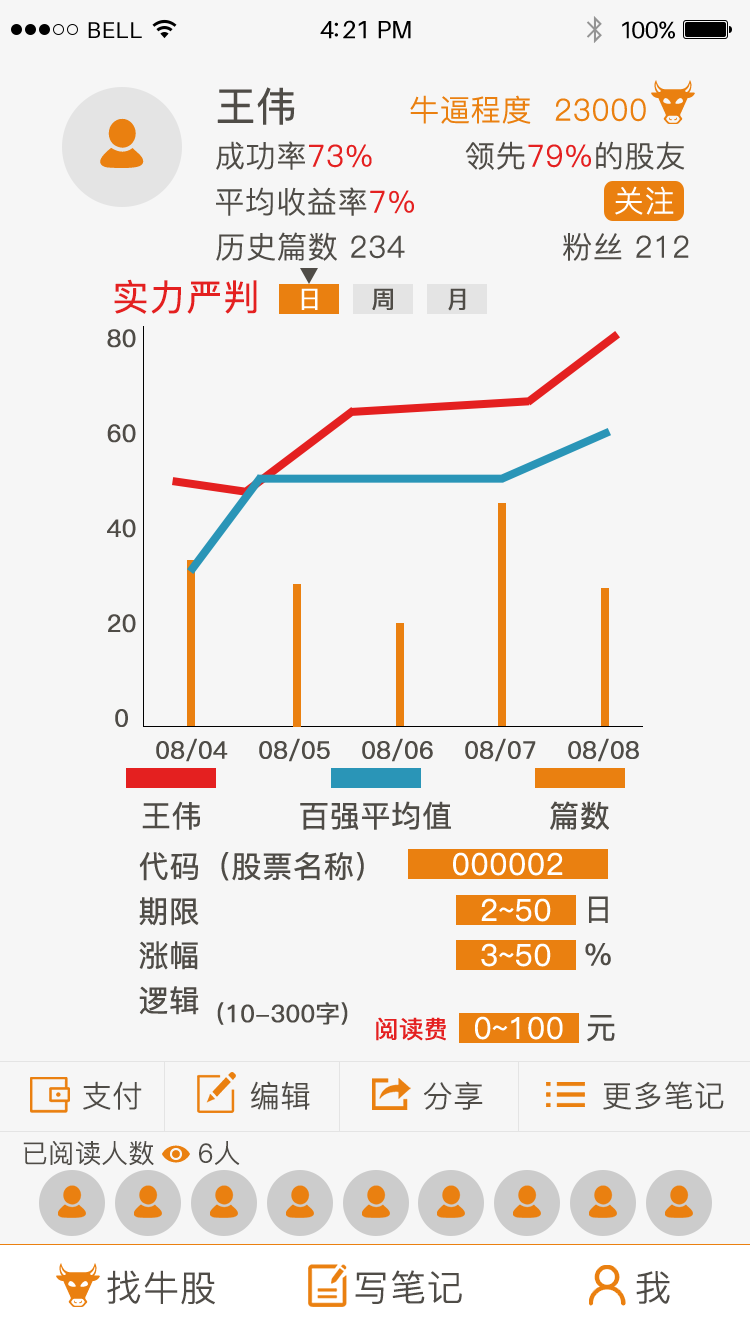
<style>
.page{position:relative;width:750px;height:1334px;background:#f6f6f6}
.page>*{position:absolute;margin:0}
.t1{font:23px "Aileron-Regular";letter-spacing:0.02em;color:#000000}
.t2{font:25px "Aileron-Regular";letter-spacing:-0.02em;color:#000000}
.t3{font:24px "Aileron-Regular";letter-spacing:-0.02em;color:#000000}
.t4{font:40px "PingFang-SC-Medium";color:#4f4c47;font-weight:bold}
.t5{font:30px "PingFang-SC-Regular";color:#ea8010;font-weight:bold}
.t6{font:30px "PingFang-SC-Regular";color:#4f4c47;font-weight:bold}
.t7{font:30px "PingFang-SC-Regular";color:#e42020;font-weight:bold}
.t8{font:30px "PingFang-SC-Regular";color:#fefefe;font-weight:bold}
.t9{font:36px "PingFang-SC-Medium";color:#e42020;font-weight:bold}
.t10{font:24px "PingFang-SC-Medium";color:#ffffff;font-weight:bold}
.t11{font:24px "PingFang-SC-Medium";color:#4f4c47;font-weight:bold}
.t12{font:30px "PingFang-SC-Medium";color:#4f4c47;font-weight:bold}
.t13{font:30px "PingFang-SC-Medium";color:#ffffff;font-weight:bold}
.t14{font:24px "PingFang-SC-Medium";color:#e42020;font-weight:bold}
.t15{font:26px "PingFang-SC-Regular";color:#4f4c47;font-weight:bold}
.t16{font:36px "PingFang-SC-Regular";color:#4f4c47;font-weight:bold}
</style>
<div class="page">
<p class="t1" style="left:88px;top:22px;width:54px;height:16px">BELL</p>
<p class="t2" style="left:320px;top:20px;width:91px;height:19px">4:21 PM</p>
<p class="t3" style="left:622px;top:21px;width:53px;height:18px">100%</p>
<p class="t4" style="left:217px;top:87px;width:78px;height:38px">王伟</p>
<p class="t5" style="left:410px;top:95px;width:236px;height:29px">牛逼程度  23000</p>
<p class="t6" style="left:216px;top:141px;width:156px;height:29px">成功率<span class="t7">73%</span></p>
<p class="t7" style="left:465px;top:141px;width:220px;height:29px"><span class="t6">领先</span>79%<span class="t6">的股友</span></p>
<p class="t6" style="left:216px;top:187px;width:198px;height:29px">平均收益率<span class="t7">7%</span></p>
<p class="t8" style="left:615px;top:186px;width:59px;height:29px">关注</p>
<p class="t6" style="left:216px;top:232px;width:189px;height:29px">历史篇数 234</p>
<p class="t6" style="left:563px;top:232px;width:126px;height:29px">粉丝 212</p>
<p class="t9" style="left:114px;top:279px;width:143px;height:35px">实力严判</p>
<p class="t10" style="left:301px;top:288px;width:17px;height:22px">日</p>
<p class="t11" style="left:372px;top:288px;width:21px;height:22px">周</p>
<p class="t11" style="left:448px;top:288px;width:18px;height:23px">月</p>
<p class="t11" style="left:107px;top:329px;width:29px;height:19px">80</p>
<p class="t11" style="left:107px;top:424px;width:29px;height:19px">60</p>
<p class="t11" style="left:107px;top:519px;width:29px;height:19px">40</p>
<p class="t11" style="left:108px;top:614px;width:28px;height:19px">20</p>
<p class="t11" style="left:115px;top:709px;width:13px;height:18px">0</p>
<p class="t11" style="left:156px;top:738px;width:72px;height:24px">08/04</p>
<p class="t11" style="left:259px;top:738px;width:71px;height:24px">08/05</p>
<p class="t11" style="left:362px;top:738px;width:71px;height:24px">08/06</p>
<p class="t11" style="left:465px;top:738px;width:71px;height:24px">08/07</p>
<p class="t11" style="left:568px;top:738px;width:71px;height:24px">08/08</p>
<p class="t12" style="left:142px;top:801px;width:58px;height:29px">王伟</p>
<p class="t12" style="left:300px;top:801px;width:151px;height:29px">百强平均值</p>
<p class="t12" style="left:550px;top:801px;width:59px;height:29px">篇数</p>
<p class="t12" style="left:139px;top:852px;width:225px;height:29px">代码（股票名称）</p>
<p class="t13" style="left:453px;top:852px;width:110px;height:24px">000002</p>
<p class="t12" style="left:139px;top:897px;width:60px;height:29px">期限</p>
<p class="t13" style="left:481px;top:898px;width:70px;height:24px">2~50</p>
<p class="t12" style="left:589px;top:896px;width:19px;height:27px">日</p>
<p class="t12" style="left:139px;top:941px;width:59px;height:29px">涨幅</p>
<p class="t13" style="left:481px;top:943px;width:70px;height:24px">3~50</p>
<p class="t12" style="left:585px;top:943px;width:26px;height:23px">%</p>
<p class="t12" style="left:139px;top:986px;width:60px;height:29px">逻辑</p>
<p class="t11" style="left:217px;top:1002px;width:131px;height:23px">(10-300字)</p>
<p class="t14" style="left:376px;top:1017px;width:70px;height:24px">阅读费</p>
<p class="t13" style="left:475px;top:1016px;width:88px;height:24px">0~100</p>
<p class="t12" style="left:587px;top:1015px;width:28px;height:27px">元</p>
<p class="t6" style="left:83px;top:1081px;width:59px;height:29px">支付</p>
<p class="t6" style="left:250px;top:1081px;width:60px;height:29px">编辑</p>
<p class="t6" style="left:424px;top:1081px;width:59px;height:29px">分享</p>
<p class="t6" style="left:603px;top:1081px;width:121px;height:29px">更多笔记</p>
<p class="t15" style="left:23px;top:1141px;width:131px;height:25px">已阅读人数</p>
<p class="t15" style="left:199px;top:1141px;width:41px;height:24px">6人</p>
<p class="t16" style="left:107px;top:1270px;width:108px;height:35px">找牛股</p>
<p class="t16" style="left:355px;top:1270px;width:107px;height:34px">写笔记</p>
<p class="t16" style="left:636px;top:1271px;width:34px;height:33px">我</p>
</div>
